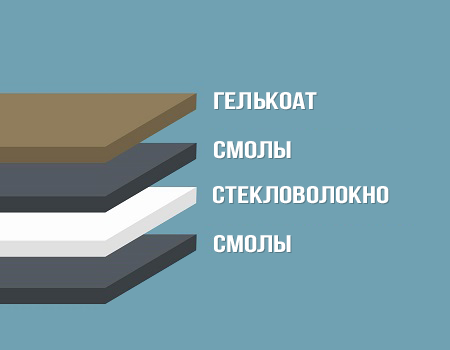
<style>
.page{position:relative;width:450px;height:350px;background:#70a1b2}
.page>*{position:absolute;margin:0}
.t1{font:24px "BebasNeueCyrillic";color:#ffffff;text-transform:uppercase;scale:1.38 1}
</style>
<div class="page">
<p class="t1" style="left:214px;top:92px;width:103px;height:18px">гелькоат</p>
<p class="t1" style="left:214px;top:141px;width:77px;height:18px">смолы</p>
<p class="t1" style="left:213px;top:186px;width:176px;height:18px">Стекловолокно</p>
<p class="t1" style="left:214px;top:235px;width:77px;height:18px">смолы</p>
</div>
